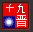
<style>
.page{position:relative;width:33px;height:32px;background:#f20000}
.page>*{position:absolute;margin:0}
.t1{font:10.4px "SimSun";color:#ffffff}
.t2{font:11.7px "SimSun";color:#ffffff}
</style>
<div class="page">
<p class="t1" style="left:6px;top:4px;width:19px;height:9px">十九</p>
<p class="t2" style="left:16px;top:15px;width:11px;height:12px">晋</p>
</div>
